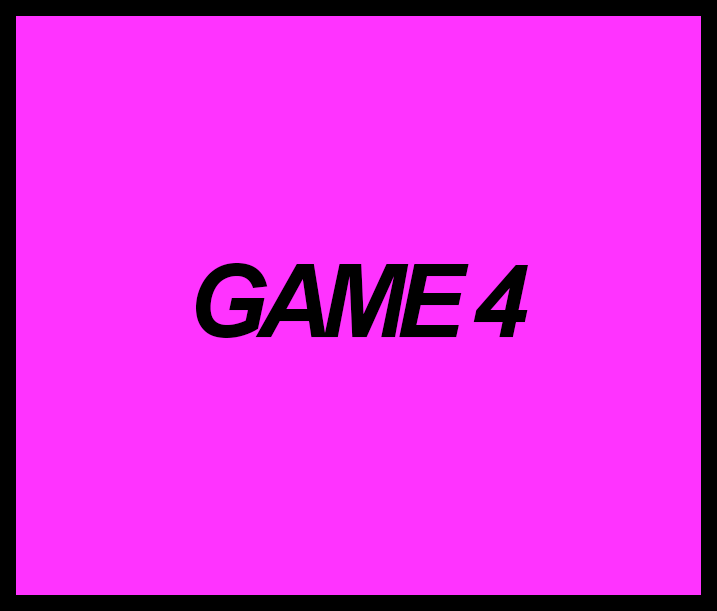
<style>
.page{position:relative;width:717px;height:611px;background:#ff33ff}
.page>*{position:absolute;margin:0}
.t1{font:102px "Arial-BoldItalicMT";letter-spacing:-0.1em;color:#000000}
</style>
<div class="page">
<p class="t1" style="left:196px;top:263px;width:332px;height:75px">GAME 4</p>
</div>
